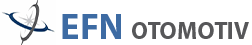
<style>
.page{position:relative;width:252px;height:45px;background:#ffffff}
.page>*{position:absolute;margin:0}
.t1{font:24px "MyriadPro-Bold";color:#575759}
.t2{font:36px "MyriadPro-Bold";color:#3d6ba3}
</style>
<div class="page">
<p class="t1" style="left:62px;top:14px;width:187px;height:25px"><span class="t2">EFN </span>OTOMOTIV</p>
</div>
